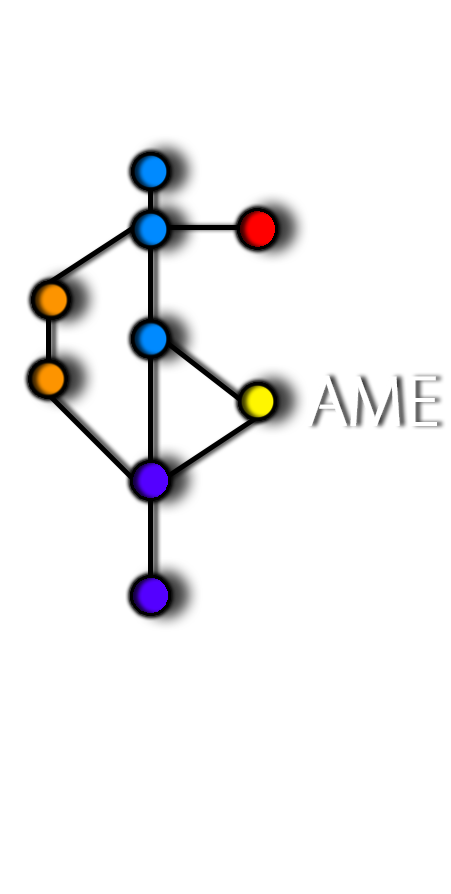
<style>
.page{position:relative;width:451px;height:894px;background:#ffffff}
.page>*{position:absolute;margin:0}
.t1{font:72px "Cleanvertising-Light";color:#ffffff;font-weight:bold}
</style>
<div class="page">
<p class="t1" style="left:306px;top:375px;width:131px;height:51px">AME</p>
</div>
